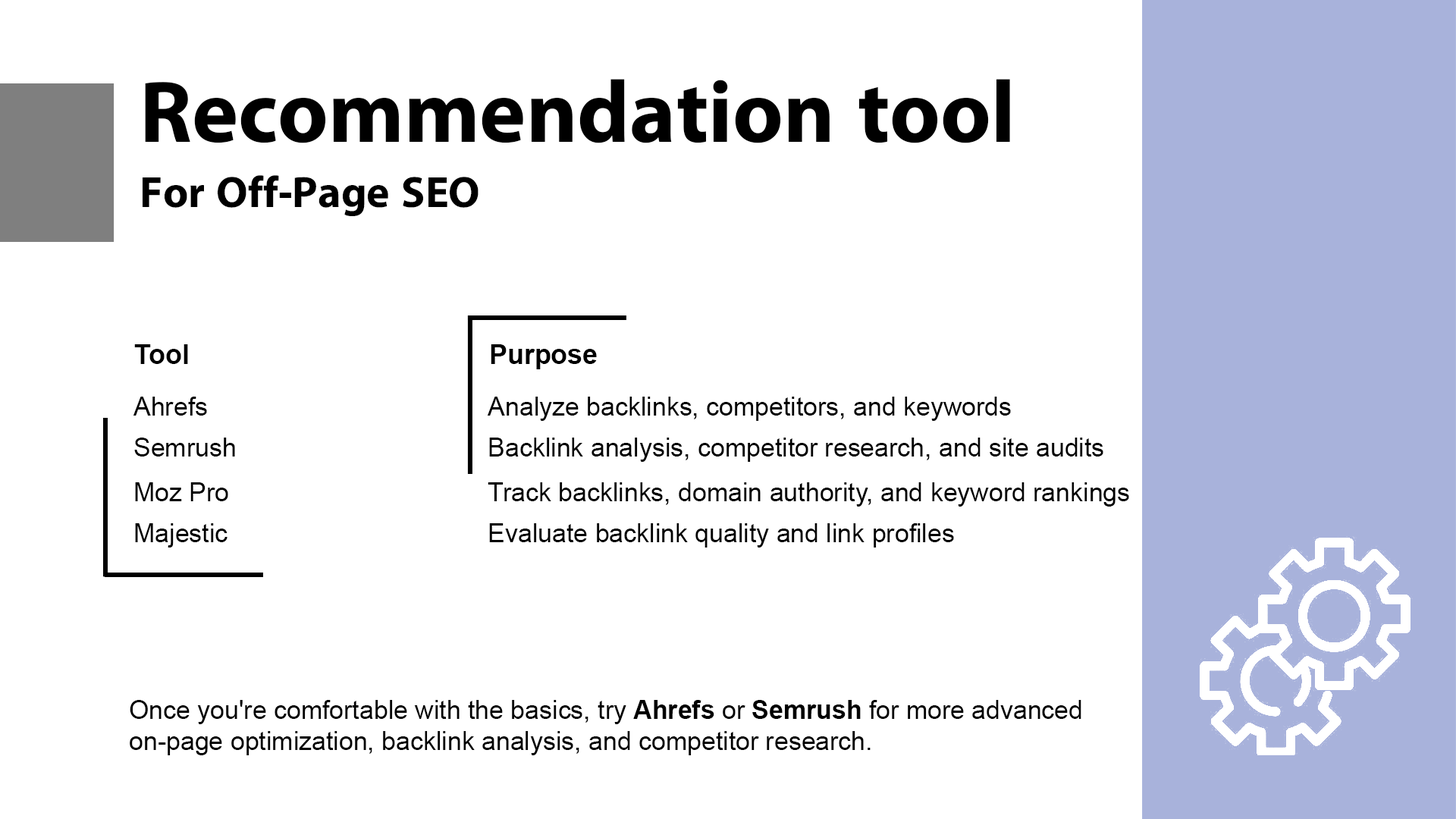
<style>
.page{position:relative;width:1456px;height:819px;background:#ffffff}
.page>*{position:absolute;margin:0}
.t1{font:88px "iKampuchea001_O'Chrov";color:#000000}
.t2{font:44.1px "iKampuchea001_O'Chrov";color:#000000}
.t3{font:27.3px "Arial-BoldMT";color:#000000}
.t4{font:27.2px "Arial-BoldMT";color:#000000}
.t5{font:25.8px "ArialMT";color:#000000}
.t6{font:25.7px "ArialMT";color:#000000}
.t7{font:25.7px "Arial-BoldMT";color:#000000}
</style>
<div class="page">
<p class="t1" style="left:145px;top:79px;width:865px;height:64px">Recommendation tool</p>
<p class="t2" style="left:143px;top:175px;width:336px;height:41px">For Off-Page SEO</p>
<p class="t3" style="left:134px;top:344px;width:54px;height:20px">Tool</p>
<p class="t4" style="left:491px;top:344px;width:106px;height:25px">Purpose</p>
<p class="t5" style="left:133px;top:397px;width:74px;height:19px">Ahrefs</p>
<p class="t6" style="left:487px;top:397px;width:524px;height:24px">Analyze backlinks, competitors, and keywords</p>
<p class="t5" style="left:134px;top:438px;width:101px;height:19px">Semrush</p>
<p class="t6" style="left:489px;top:438px;width:614px;height:24px">Backlink analysis, competitor research, and site audits</p>
<p class="t5" style="left:135px;top:482px;width:93px;height:19px">Moz Pro</p>
<p class="t6" style="left:488px;top:482px;width:641px;height:25px">Track backlinks, domain authority, and keyword rankings</p>
<p class="t5" style="left:135px;top:523px;width:92px;height:25px">Majestic</p>
<p class="t6" style="left:489px;top:523px;width:465px;height:25px">Evaluate backlink quality and link profiles</p>
<p class="t6" style="left:130px;top:700px;width:951px;height:55px">Once you're comfortable with the basics, try <span class="t7">Ahrefs </span>or <span class="t7">Semrush </span>for more advanced <br>on-page optimization, backlink analysis, and competitor research.</p>
</div>
